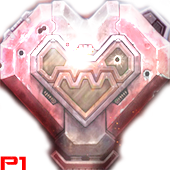
<style>
.page{position:relative;width:170px;height:170px;background:#ffffff}
.page>*{position:absolute;margin:0}
.t1{font:19.4px "CGFLocustResistance";color:#ff0000}
</style>
<div class="page">
<p class="t1" style="left:0px;top:156px;width:26px;height:14px">p1</p>
</div>
